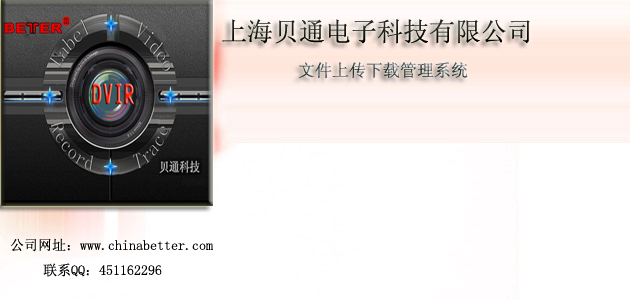
<style>
.page{position:relative;width:630px;height:300px;background:#ffffff}
.page>*{position:absolute;margin:0}
.t1{font:26px "SimSun";color:#1a1a1a}
.t2{font:17px "SimSun"}
.t3{font:14px "SimSun";color:#000001}
</style>
<div class="page">
<p class="t1" style="left:222px;top:19px;width:308px;height:25px">上海贝通电子科技有限公司</p>
<p class="t2" style="left:298px;top:62px;width:170px;height:16px">文件上传下载管理系统</p>
<p class="t3" style="left:10px;top:238px;width:203px;height:14px">公司网址：www.chinabetter.com</p>
<p class="t3" style="left:43px;top:263px;width:119px;height:14px">联系QQ：451162296</p>
</div>
